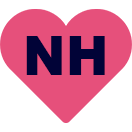
<style>
.page{position:relative;width:132px;height:132px;background:#e6507b}
.page>*{position:absolute;margin:0}
.t1{font:55.3px "Arial-Black";color:#010337;scale:0.92 1}
</style>
<div class="page">
<p class="t1" style="left:26px;top:36px;width:79px;height:39px">NH</p>
</div>
